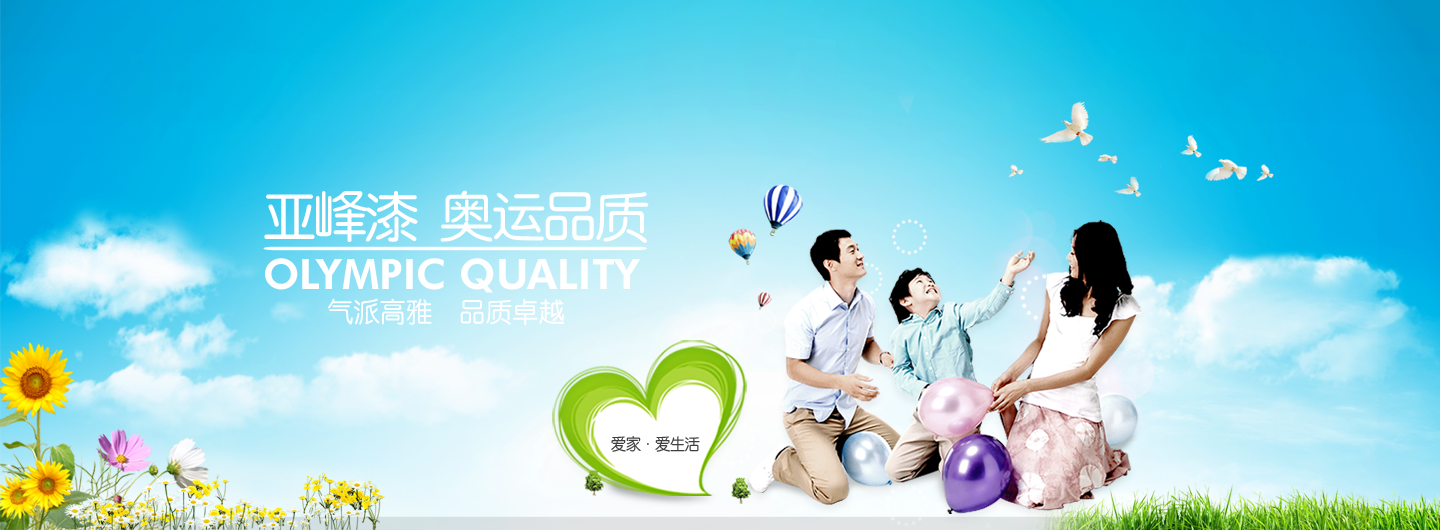
<style>
.page{position:relative;width:1440px;height:530px}
.page>*{position:absolute;margin:0}
.t1{font:55.6px "HYe3gj";letter-spacing:-0.075em;color:#ffffff}
.t2{font:42.1px "051-CAI978";color:#ffffff;text-transform:uppercase}
.t3{font:27.5px "HYe3gj";color:#ffffff;scale:0.96 1}
.t4{font:16.6px "HYe3gj";letter-spacing:-0.075em;color:#3f3f3f;scale:0.96 1}
</style>
<div class="page">
<p class="t1" style="left:264px;top:190px;width:385px;height:53px">亚峰漆 奥运品质</p>
<p class="t2" style="left:265px;top:258px;width:376px;height:35px">Olympic quality</p>
<p class="t3" style="left:328px;top:298px;width:236px;height:27px">气派高雅  品质卓越</p>
<p class="t4" style="left:611px;top:436px;width:89px;height:16px">爱家·爱生活</p>
</div>
